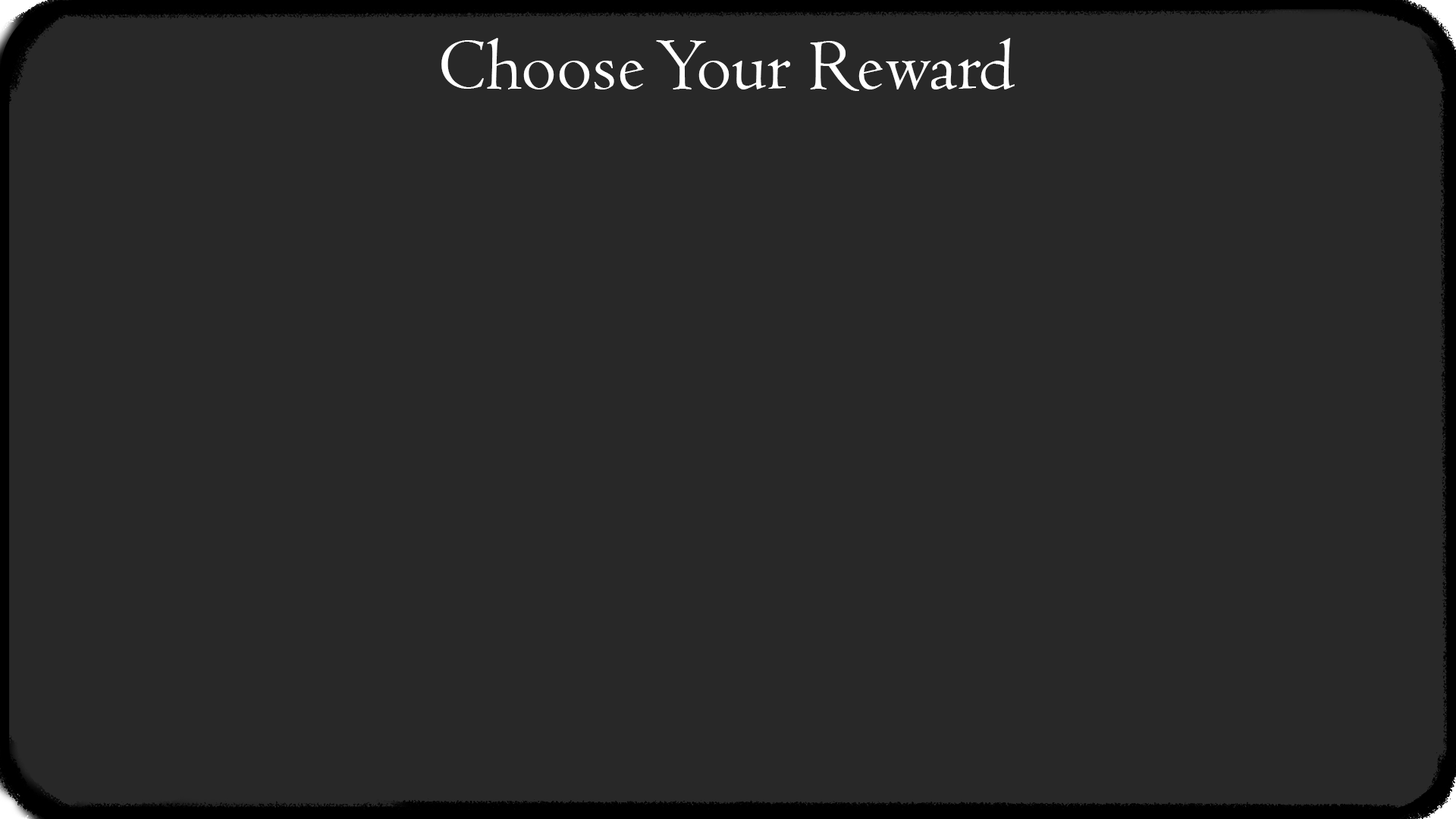
<style>
.page{position:relative;width:1456px;height:819px;background:#282828}
.page>*{position:absolute;margin:0}
.t1{font:75.8px "Centaur";color:#ffffff}
</style>
<div class="page">
<p class="t1" style="left:441px;top:38px;width:574px;height:53px">Choose Your Reward</p>
</div>
